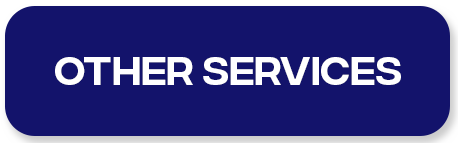
<style>
.page{position:relative;width:458px;height:143px;background:#13136b}
.page>*{position:absolute;margin:0}
.t1{font:38.3px "IntegralCF-Regular";color:#ffffff}
</style>
<div class="page">
<p class="t1" style="left:55px;top:57px;width:346px;height:28px">other services</p>
</div>
